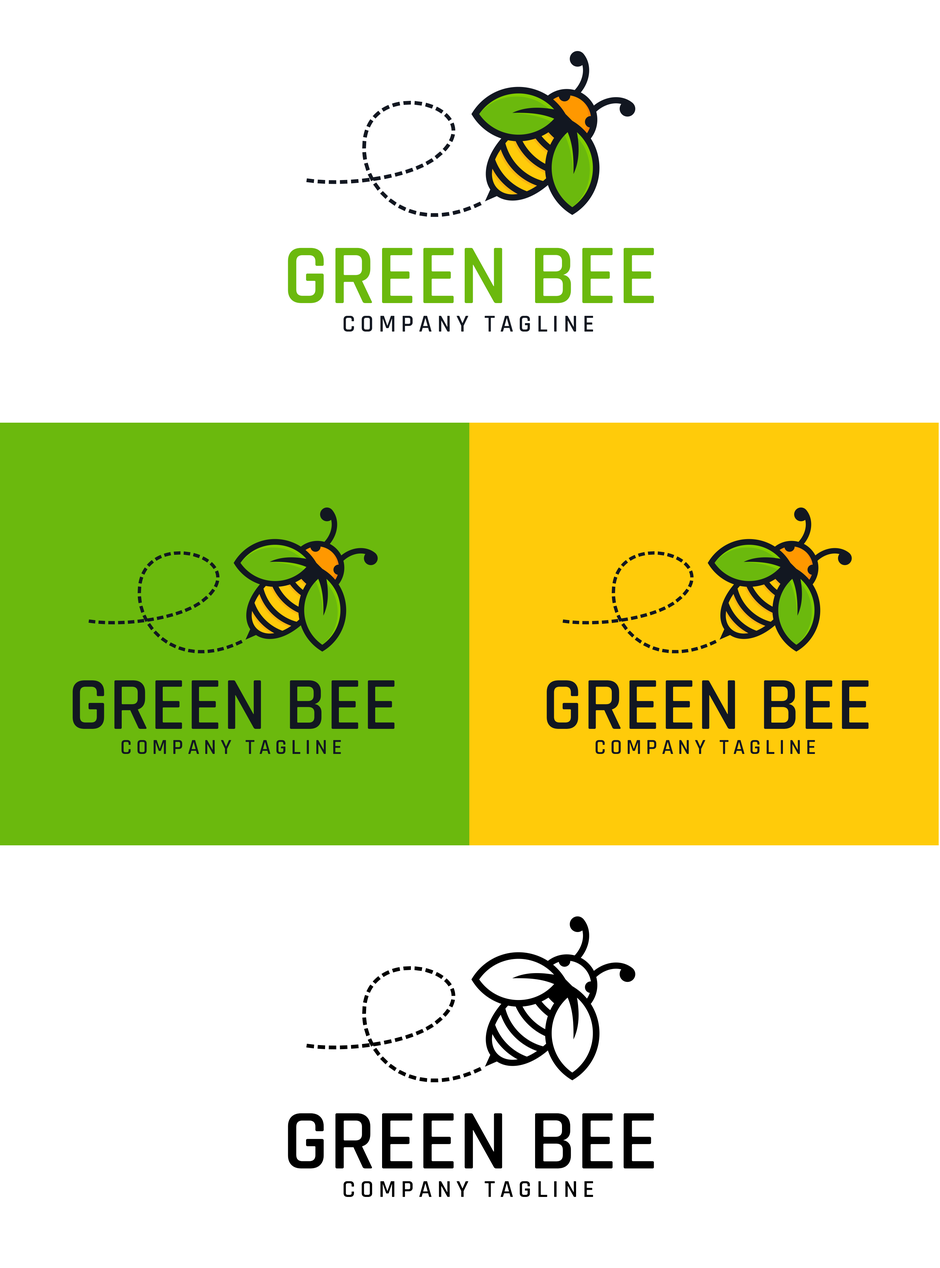
<style>
.page{position:relative;width:940px;height:1268px;background:#ffffff}
.page>*{position:absolute;margin:0}
.t1{font:85.9px "Rajdhani-Semibold";color:#6bb90d}
.t2{font:24.5px "Rajdhani-Semibold";letter-spacing:0.2em;color:#121721}
.t3{font:75.5px "Rajdhani-Semibold";color:#121721}
.t4{font:21.6px "Rajdhani-Semibold";letter-spacing:0.2em;color:#121721}
.t5{font:85.9px "Rajdhani-Semibold";color:#000000}
.t6{font:24.5px "Rajdhani-Semibold";letter-spacing:0.2em;color:#000000}
</style>
<div class="page">
<p class="t1" style="left:288px;top:248px;width:366px;height:55px">GREEN BEE</p>
<p class="t2" style="left:344px;top:316px;width:250px;height:16px">COMPANY TAGLINE</p>
<p class="t3" style="left:73px;top:680px;width:322px;height:49px">GREEN BEE</p>
<p class="t3" style="left:547px;top:680px;width:322px;height:49px">GREEN BEE</p>
<p class="t4" style="left:121px;top:740px;width:220px;height:14px">COMPANY TAGLINE</p>
<p class="t4" style="left:596px;top:740px;width:220px;height:14px">COMPANY TAGLINE</p>
<p class="t5" style="left:288px;top:1113px;width:366px;height:55px">GREEN BEE</p>
<p class="t6" style="left:344px;top:1181px;width:250px;height:16px">COMPANY TAGLINE</p>
</div>
